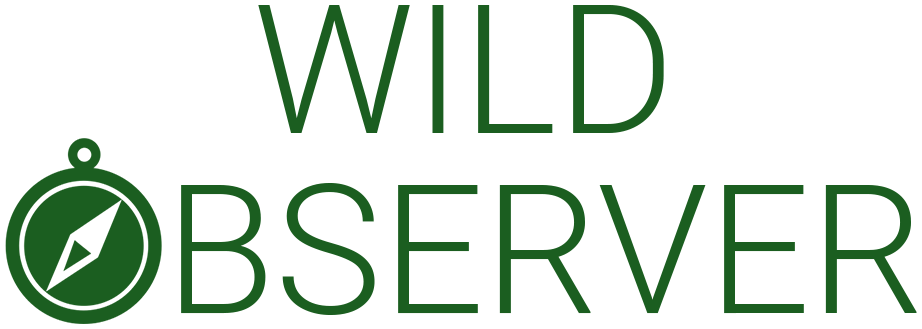
<style>
.page{position:relative;width:922px;height:329px;background:#ffffff}
.page>*{position:absolute;margin:0}
.t1{font:180px "Roboto-Light";color:#1b5e20}
</style>
<div class="page">
<p class="t1" style="left:258px;top:5px;width:406px;height:128px">WILD</p>
<p class="t1" style="left:181px;top:183px;width:736px;height:132px">BSERVER</p>
</div>
